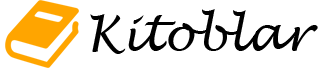
<style>
.page{position:relative;width:320px;height:68px;background:#ffffff}
.page>*{position:absolute;margin:0}
.t1{font:48px "LucidaHandwriting-Italic";color:#000000}
</style>
<div class="page">
<p class="t1" style="left:90px;top:9px;width:228px;height:45px">Kitoblar</p>
</div>
